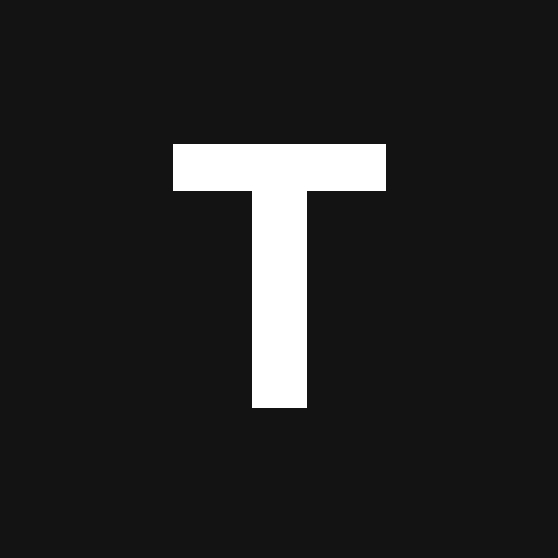
<style>
.page{position:relative;width:558px;height:558px;background:#131313}
.page>*{position:absolute;margin:0}
.t1{font:367px "Helvetica-Bold";letter-spacing:-0.04em;color:#ffffff}
</style>
<div class="page">
<p class="t1" style="left:173px;top:144px;width:213px;height:264px">T</p>
</div>
